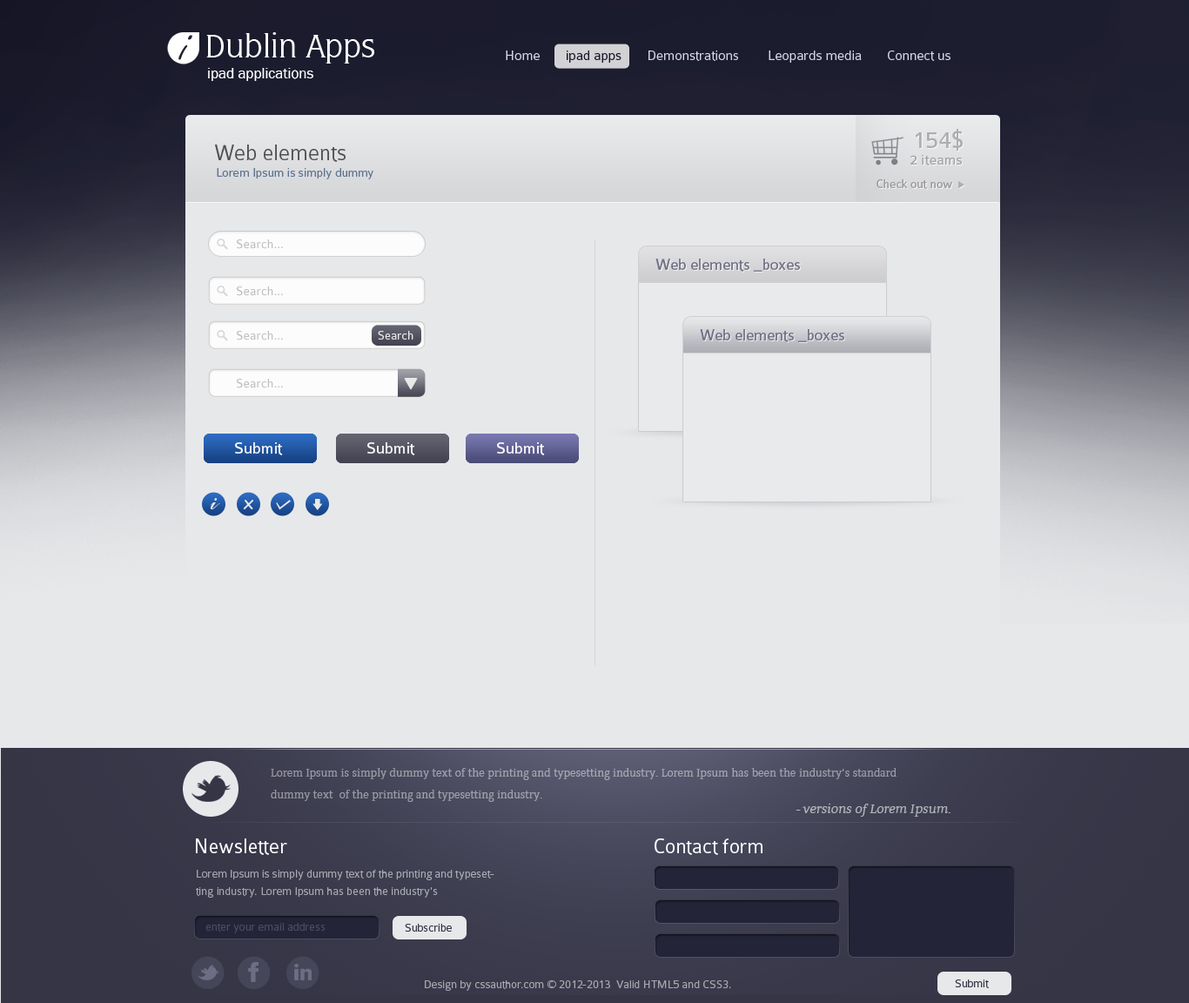
<style>
.page{position:relative;width:1189px;height:1003px;background:#e7e8ea}
.page>*{position:absolute;margin:0}
.t1{font:47.9px "FreeportPlain";color:#1f1f31}
.t2{font:33.9px "FlareLightGothic";color:#ffffff}
.t3{font:14.8px "Colaborate-Light";color:#d7d7e3}
.t4{font:14.8px "Colaborate-Light";color:#161628}
.t5{font:14.8px "FranklinGothic-Book";color:#ffffff}
.t6{font:25.2px "Colaborate-Regular";color:#aeaeae}
.t7{font:23.5px "Colaborate-Light";color:#505050}
.t8{font:14.8px "Colaborate-Regular";color:#a4a3a3}
.t9{font:13.1px "Colaborate-Light";color:#5f7390}
.t10{font:13.1px "Colaborate-Regular";letter-spacing:-0.02em;color:#a2a2a5}
.t11{font:13.1px "Colaborate-Regular";color:#bfbfbf}
.t12{font:16.5px "Colaborate-Regular";letter-spacing:-0.02em;color:#828297}
.t13{font:13.1px "Colaborate-Light";color:#e9e8e8}
.t14{font:16.5px "Colaborate-Regular";color:#ffffff}
.t15{font:23.5px "CommercialScriptBT-Regular";color:#e9e8e8}
.t16{font:18.3px "ComicSansMS";color:#e9e8e8}
.t17{font:11.3px/21.8px "Contra";color:#a0a0ab}
.t18{font:13.1px "Contra-Italic";color:#b3b3bb}
.t19{font:21.8px "Colaborate-Light";color:#ffffff}
.t20{font:12.2px/17.4px "Colaborate-Light";color:#a6a6ae}
.t21{font:12.2px "Colaborate-Light";color:#4b4b5c}
.t22{font:12.2px "Colaborate-Light";color:#363648}
.t23{font:12.2px "Colaborate-Light";color:#a6a6ae}
</style>
<div class="page">
<p class="t1" style="left:178px;top:35px;width:14px;height:25px">i</p>
<p class="t2" style="left:206px;top:32px;width:168px;height:32px">Dublin Apps</p>
<p class="t3" style="left:506px;top:50px;width:445px;height:13px">Home      <span class="t4"> ipad apps</span>       Demonstrations        Leopards media       Connect us</p>
<p class="t5" style="left:208px;top:68px;width:105px;height:13px">ipad applications</p>
<p class="t6" style="left:915px;top:129px;width:48px;height:22px">154$</p>
<p class="t7" style="left:215px;top:145px;width:131px;height:17px">Web elements</p>
<p class="t8" style="left:911px;top:155px;width:51px;height:10px">2 iteams</p>
<p class="t9" style="left:217px;top:168px;width:156px;height:11px">Lorem Ipsum is simply dummy</p>
<p class="t10" style="left:877px;top:179px;width:75px;height:10px">Check out now</p>
<p class="t11" style="left:237px;top:239px;width:46px;height:10px">Search...</p>
<p class="t12" style="left:655px;top:259px;width:145px;height:13px">Web elements _boxes</p>
<p class="t11" style="left:237px;top:286px;width:46px;height:10px">Search...</p>
<p class="t12" style="left:700px;top:329px;width:144px;height:13px">Web elements _boxes</p>
<p class="t11" style="left:237px;top:331px;width:46px;height:9px">Search...</p>
<p class="t13" style="left:378px;top:331px;width:35px;height:8px">Search</p>
<p class="t11" style="left:237px;top:379px;width:46px;height:9px">Search...</p>
<p class="t14" style="left:235px;top:442px;width:48px;height:13px">Submit</p>
<p class="t14" style="left:367px;top:442px;width:48px;height:13px">Submit</p>
<p class="t14" style="left:497px;top:442px;width:48px;height:13px">Submit</p>
<p class="t15" style="left:210px;top:498px;width:10px;height:11px">i</p>
<p class="t16" style="left:243px;top:500px;width:10px;height:9px">x</p>
<p class="t17" style="left:271px;top:768px;width:626px;height:34px">Lorem Ipsum is simply dummy text of the printing and typesetting industry. Lorem Ipsum has been the industry's standard dummy text  of the printing and typesetting industry.</p>
<p class="t18" style="left:796px;top:803px;width:155px;height:14px">- versions of Lorem Ipsum.</p>
<p class="t19" style="left:196px;top:838px;width:91px;height:17px">Newsletter</p>
<p class="t19" style="left:655px;top:838px;width:108px;height:17px">Contact form</p>
<p class="t20" style="left:196px;top:870px;width:298px;height:27px;text-align:justify">Lorem Ipsum is simply dummy text of the printing and typesetting industry. Lorem Ipsum has been the industry's <br>standard dummy text ever sinc</p>
<p class="t21" style="left:205px;top:923px;width:121px;height:10px">enter your email address</p>
<p class="t22" style="left:405px;top:924px;width:47px;height:7px">Subscribe</p>
<p class="t23" style="left:425px;top:980px;width:306px;height:11px">Design by cssauthor.com © 2012-2013  Valid HTML5 and CSS3.</p>
<p class="t22" style="left:955px;top:979px;width:34px;height:9px">Submit</p>
</div>
